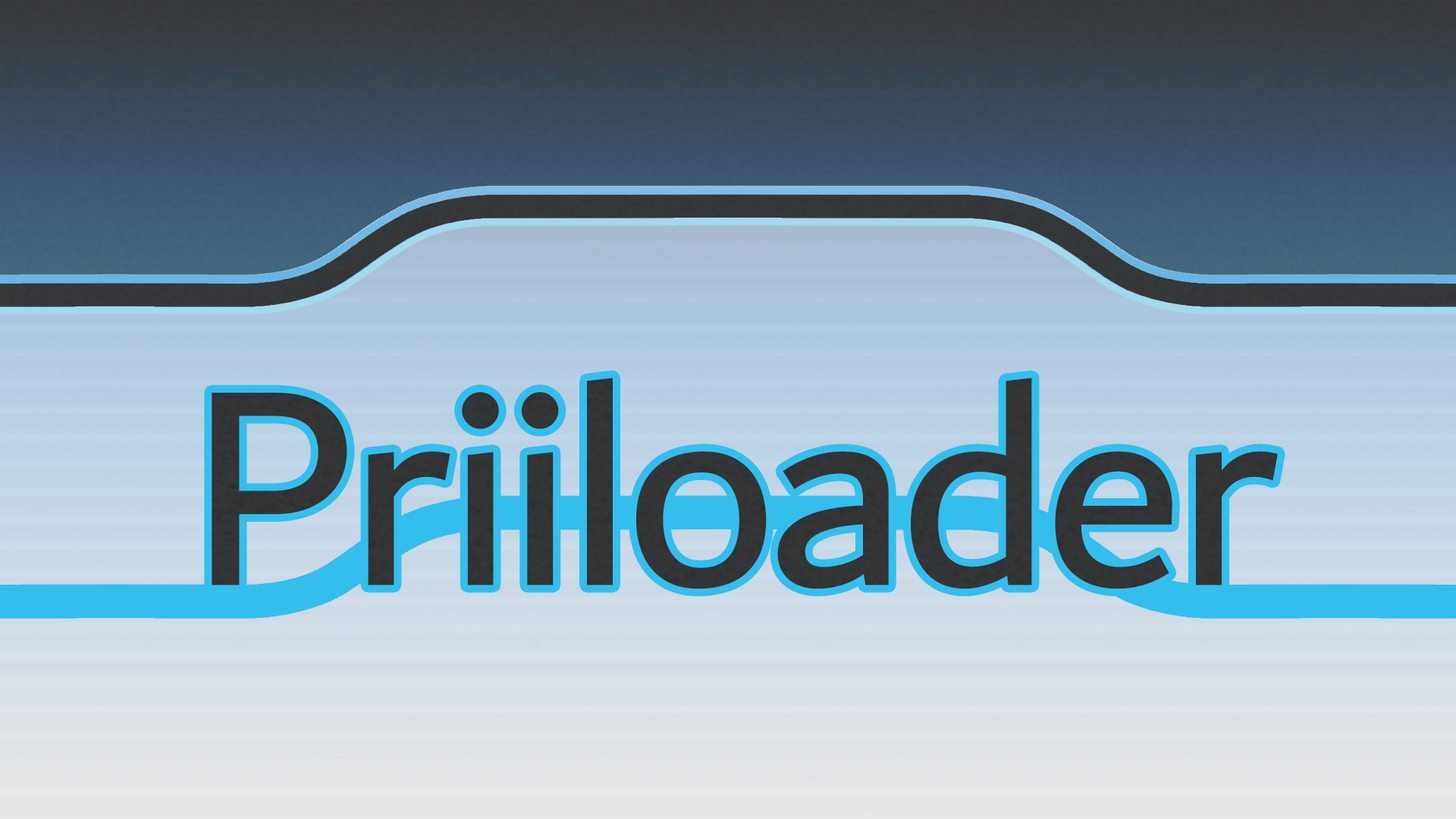
<style>
.page{position:relative;width:1456px;height:819px}
.page>*{position:absolute;margin:0}
.t1{font:296.8px "Dubai-Regular";letter-spacing:-0.025em;color:#323435}
</style>
<div class="page">
<p class="t1" style="left:212px;top:378px;width:1066px;height:211px">Priiloader</p>
</div>
